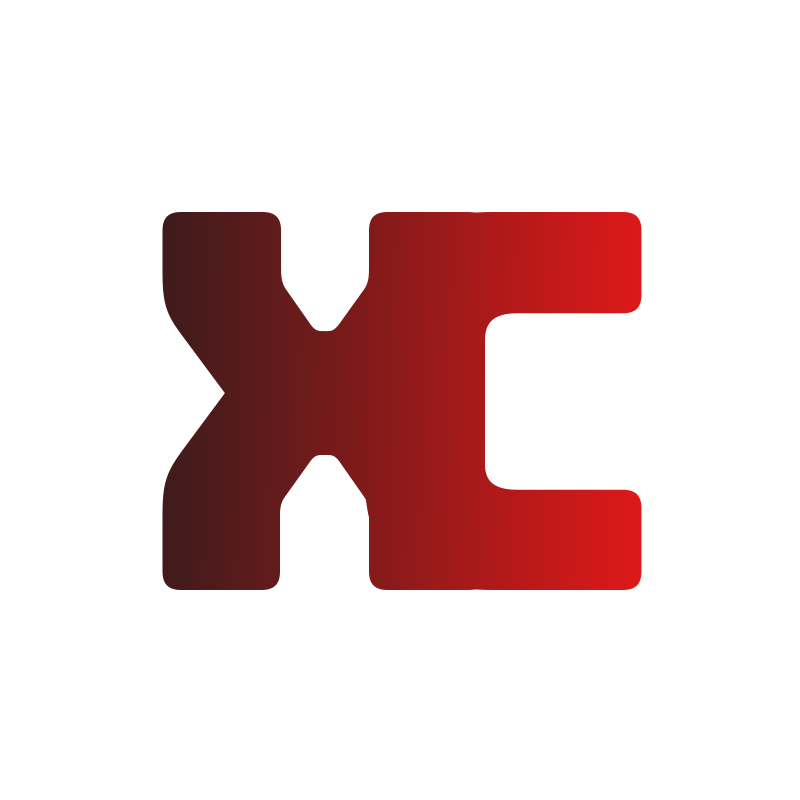
<style>
.page{position:relative;width:800px;height:800px;background:#ffffff}
.page>*{position:absolute;margin:0}
.t1{font:525px "Bungee-Regular";letter-spacing:0.05em}
</style>
<div class="page">
<p class="t1" style="left:162px;top:212px;width:325px;height:378px">X</p>
<p class="t1" style="left:365px;top:212px;width:277px;height:378px">c</p>
</div>
